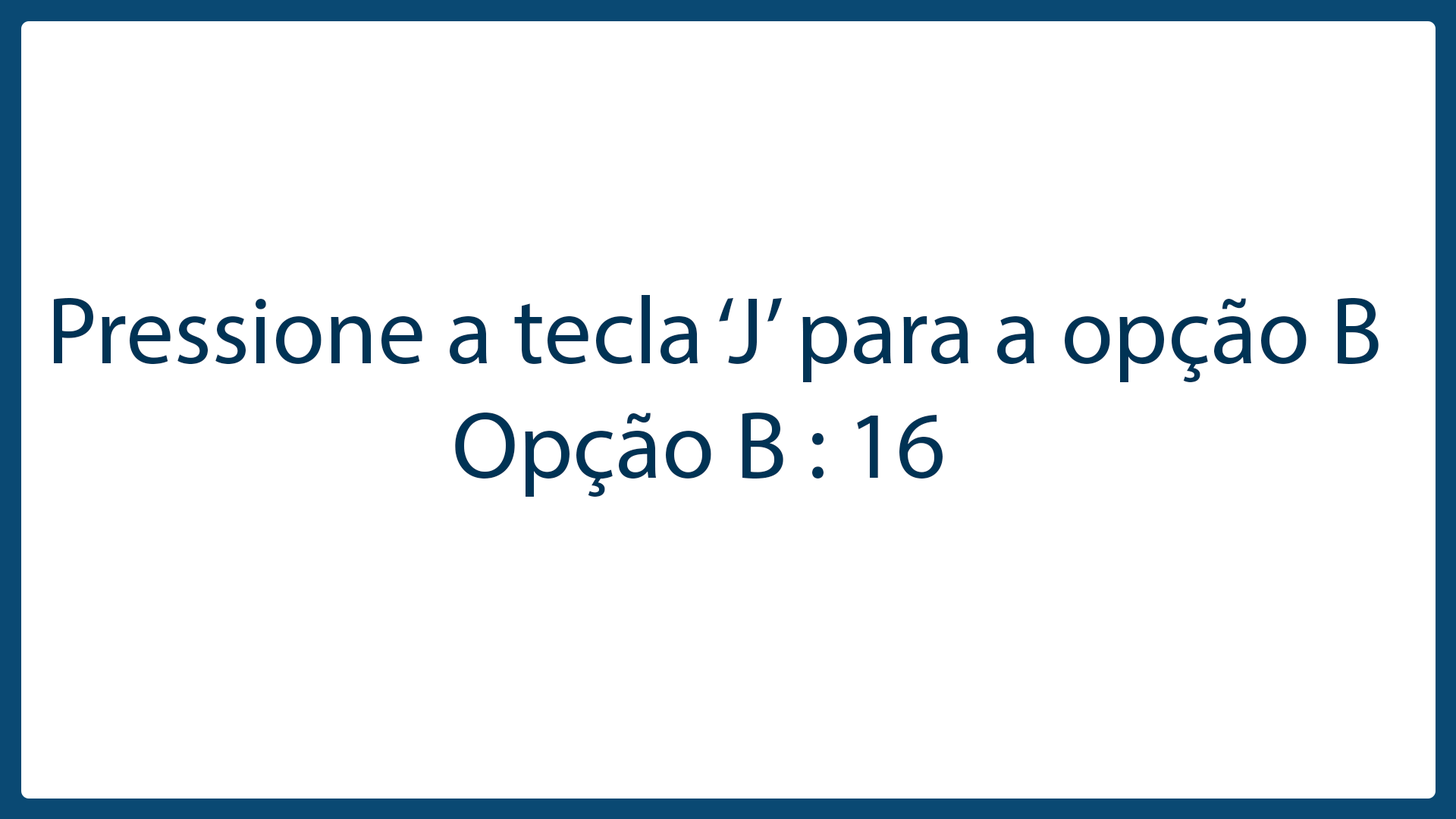
<style>
.page{position:relative;width:1456px;height:819px;background:#ffffff}
.page>*{position:absolute;margin:0}
.t1{font:95.9px "MyriadPro-Regular";color:#003355}
</style>
<div class="page">
<p class="t1" style="left:54px;top:295px;width:1325px;height:202px">Pressione a tecla ‘J’ para a opção B<br>                    Opção B : 16</p>
</div>
